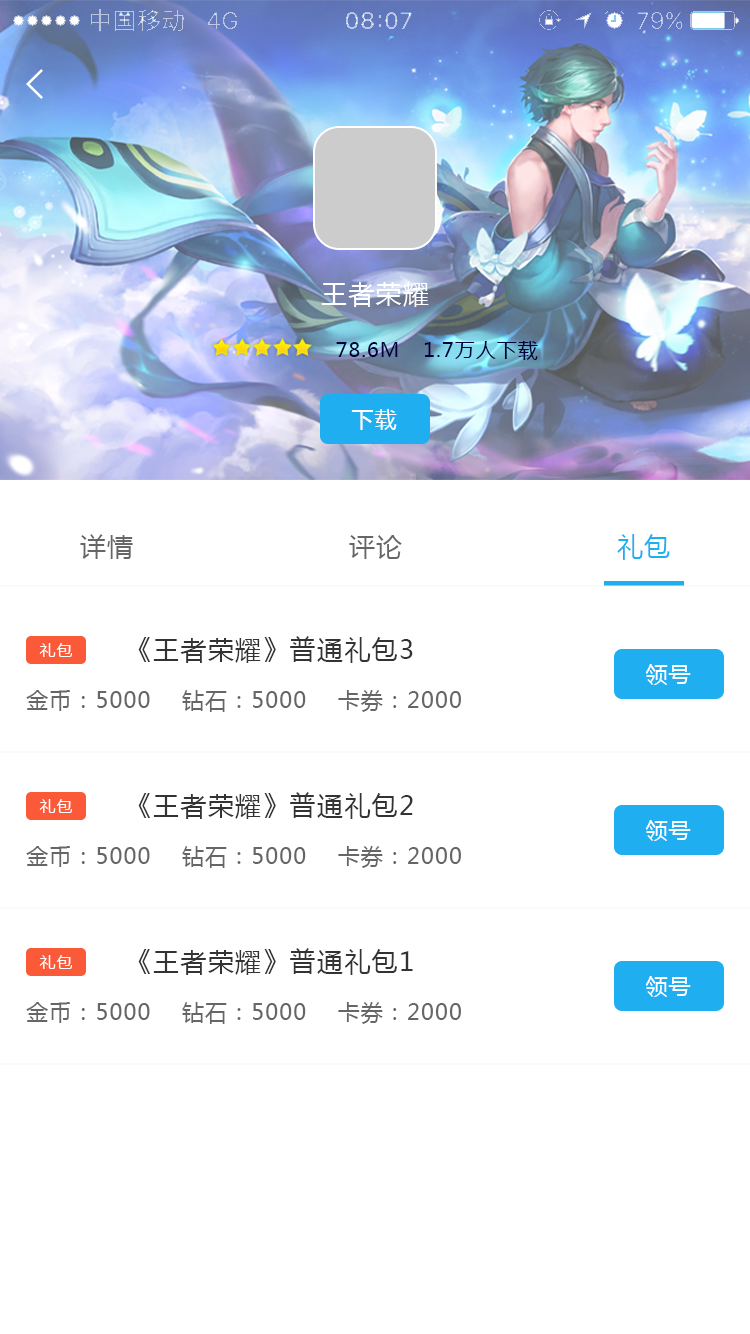
<style>
.page{position:relative;width:750px;height:1334px;background:#ffffff}
.page>*{position:absolute;margin:0}
.t1{font:26px "MicrosoftYaHei";letter-spacing:0.05em;color:#ffffff}
.t2{font:20px "MicrosoftYaHei";letter-spacing:0.05em;color:#000040}
.t3{font:22px "MicrosoftYaHei";letter-spacing:0.05em;color:#ffffff}
.t4{font:26px "MicrosoftYaHei";letter-spacing:0.05em;color:#666666}
.t5{font:26px "MicrosoftYaHei";letter-spacing:0.05em;color:#1faff0}
.t6{font:26px "MicrosoftYaHei";letter-spacing:0.05em;color:#333333}
.t7{font:16px "MicrosoftYaHei";letter-spacing:0.05em;color:#ffffff}
.t8{font:22px "MicrosoftYaHei";letter-spacing:0.05em;color:#666666}
</style>
<div class="page">
<p class="t1" style="left:321px;top:282px;width:108px;height:25px">王者荣耀</p>
<p class="t2" style="left:336px;top:342px;width:62px;height:15px">78.6M</p>
<p class="t2" style="left:424px;top:341px;width:114px;height:19px">1.7万人下载</p>
<p class="t3" style="left:351px;top:409px;width:46px;height:21px">下载</p>
<p class="t4" style="left:80px;top:534px;width:53px;height:25px">详情</p>
<p class="t5" style="left:617px;top:534px;width:53px;height:26px">礼包</p>
<p class="t4" style="left:349px;top:535px;width:53px;height:24px">评论</p>
<p class="t6" style="left:138px;top:636px;width:275px;height:27px">《王者荣耀》普通礼包3</p>
<p class="t7" style="left:39px;top:643px;width:34px;height:14px">礼包</p>
<p class="t3" style="left:645px;top:664px;width:46px;height:21px">领号</p>
<p class="t8" style="left:26px;top:690px;width:435px;height:22px">金币：5000    钻石：5000    卡券：2000</p>
<p class="t6" style="left:138px;top:792px;width:275px;height:27px">《王者荣耀》普通礼包2</p>
<p class="t7" style="left:39px;top:799px;width:34px;height:14px">礼包</p>
<p class="t3" style="left:645px;top:820px;width:46px;height:21px">领号</p>
<p class="t8" style="left:26px;top:846px;width:435px;height:22px">金币：5000    钻石：5000    卡券：2000</p>
<p class="t6" style="left:138px;top:948px;width:275px;height:27px">《王者荣耀》普通礼包1</p>
<p class="t7" style="left:39px;top:955px;width:34px;height:14px">礼包</p>
<p class="t3" style="left:645px;top:976px;width:46px;height:21px">领号</p>
<p class="t8" style="left:26px;top:1002px;width:435px;height:22px">金币：5000    钻石：5000    卡券：2000</p>
</div>
